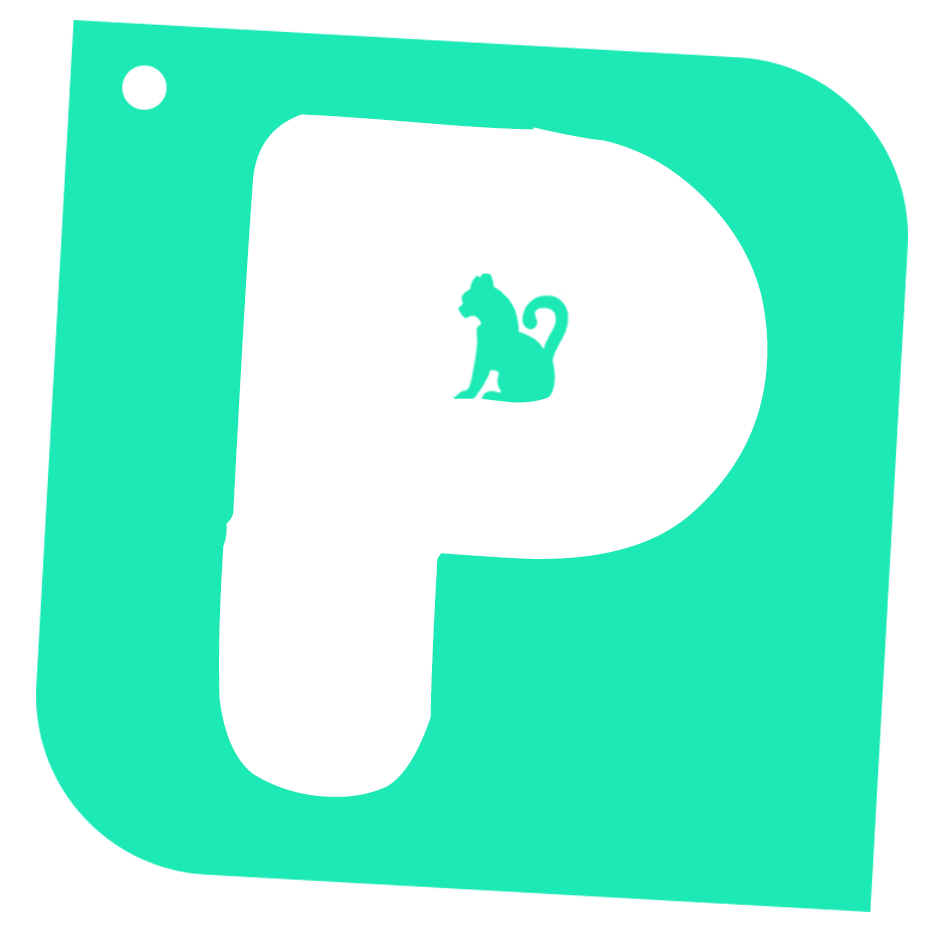
<style>
.page{position:relative;width:945px;height:945px;background:#1de9b6}
.page>*{position:absolute;margin:0}
.t1{font:917.1px "AlphaFridgeMagnets";letter-spacing:0.12em;color:#ffffff;scale:1.04 1}
</style>
<div class="page">
<p class="t1" style="left:219px;top:114px;width:549px;height:683px;rotate:1deg">P</p>
</div>
